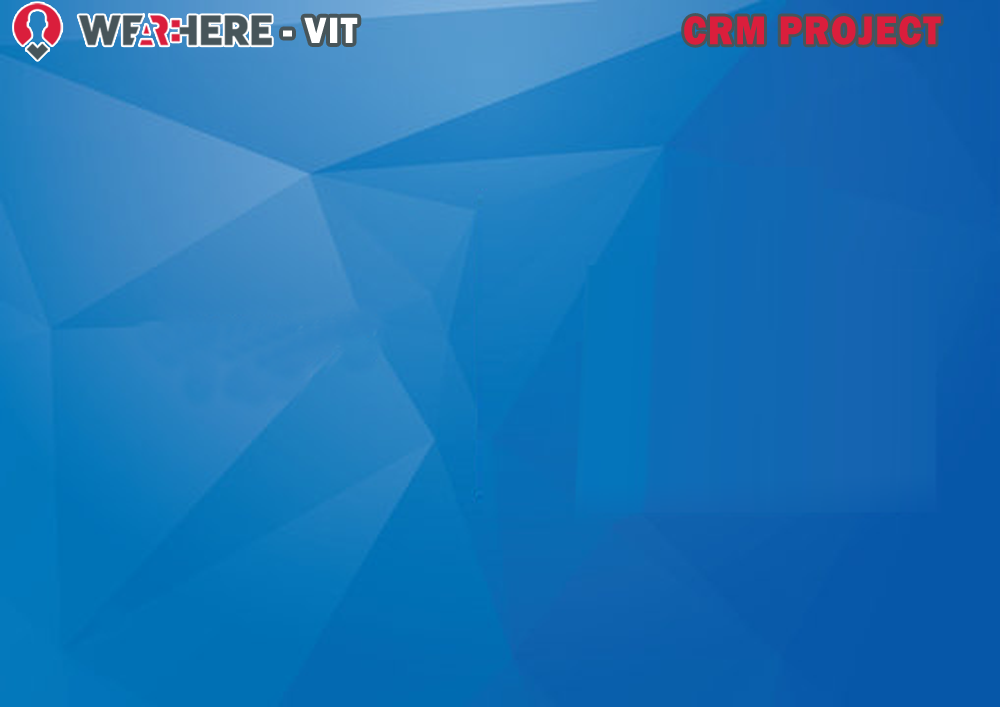
<style>
.page{position:relative;width:1000px;height:707px}
.page>*{position:absolute;margin:0}
.t1{font:37.8px "FranklinGothic-Heavy";letter-spacing:0.05em;color:#ffffff;scale:0.91 1}
.t2{font:41.2px "FranklinGothic-Heavy";letter-spacing:0.05em;color:#da1e3c;scale:0.89 1}
</style>
<div class="page">
<p class="t1" style="left:283px;top:17px;width:75px;height:26px">- VIT</p>
<p class="t2" style="left:684px;top:16px;width:257px;height:29px">CRM PROJECT</p>
</div>
